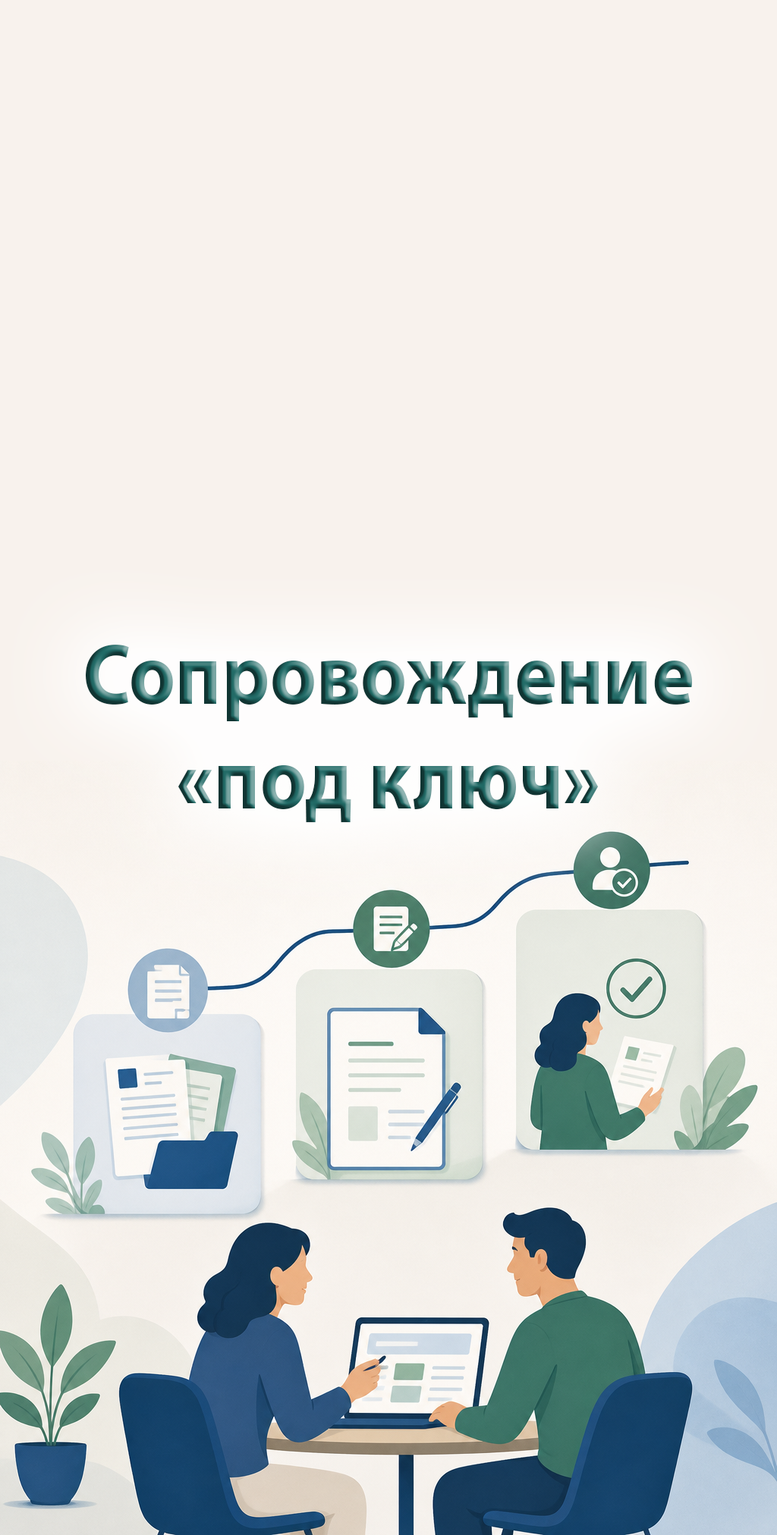
<style>
.page{position:relative;width:777px;height:1535px;background:#f8f2ed}
.page>*{position:absolute;margin:0}
.t1{font:87px "MyriadPro-Bold";scale:0.92 1}
</style>
<div class="page">
<p class="t1" style="left:86px;top:645px;width:606px;height:178px;text-align:center">Сопровождение<br>«под ключ»</p>
</div>
